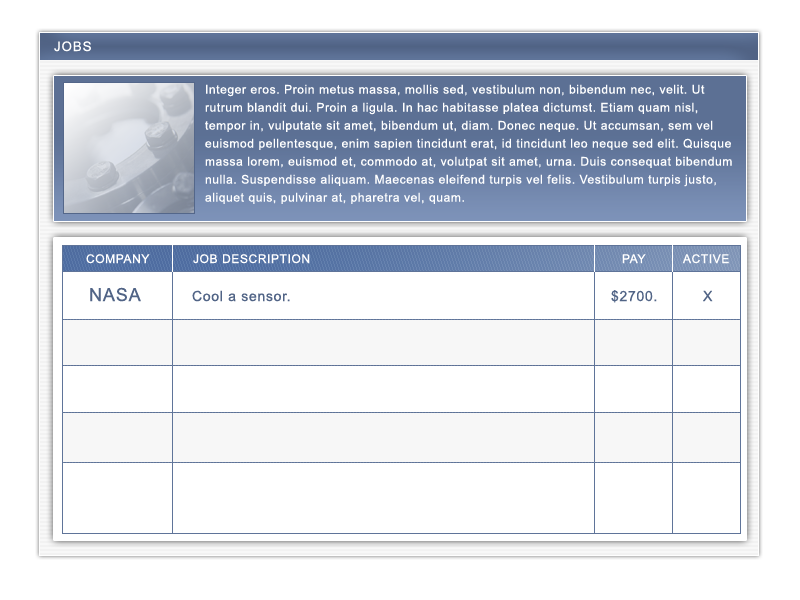
<style>
.page{position:relative;width:800px;height:600px;background:#ffffff}
.page>*{position:absolute;margin:0}
.t1{font:20px "Vrinda";letter-spacing:0.05em;color:#ffffff;text-transform:uppercase}
.t2{font:12px/18px "ArialMT";letter-spacing:0.05em;color:#ffffff}
.t3{font:12px "ArialMT";letter-spacing:0.05em;color:#ffffff}
.t4{font:18px "ArialMT";letter-spacing:0.05em;color:#516486}
.t5{font:14px "ArialMT";letter-spacing:0.05em;color:#516486}
</style>
<div class="page">
<p class="t1" style="left:54px;top:41px;width:37px;height:11px">jobs</p>
<p class="t2" style="left:205px;top:84px;width:527px;height:120px">Integer eros. Proin metus massa, mollis sed, vestibulum non, bibendum nec, velit. Ut rutrum blandit dui. Proin a ligula. In hac habitasse platea dictumst. Etiam quam nisl, tempor in, vulputate sit amet, bibendum ut, diam. Donec neque. Ut accumsan, sem vel euismod pellentesque, enim sapien tincidunt erat, id tincidunt leo neque sed elit. Quisque massa lorem, euismod et, commodo at, volutpat sit amet, urna. Duis consequat bibendum nulla. Suspendisse aliquam. Maecenas eleifend turpis vel felis. Vestibulum turpis justo, aliquet quis, pulvinar at, pharetra vel, quam.</p>
<p class="t3" style="left:86px;top:254px;width:64px;height:10px">COMPANY</p>
<p class="t3" style="left:193px;top:254px;width:117px;height:10px">JOB DESCRIPTION</p>
<p class="t3" style="left:622px;top:254px;width:24px;height:10px">PAY</p>
<p class="t3" style="left:682px;top:254px;width:47px;height:10px">ACTIVE</p>
<p class="t4" style="left:90px;top:287px;width:51px;height:15px">NASA</p>
<p class="t5" style="left:192px;top:290px;width:98px;height:12px">Cool a sensor.</p>
<p class="t5" style="left:611px;top:290px;width:46px;height:13px">$2700.</p>
<p class="t5" style="left:703px;top:290px;width:10px;height:12px">X</p>
</div>
